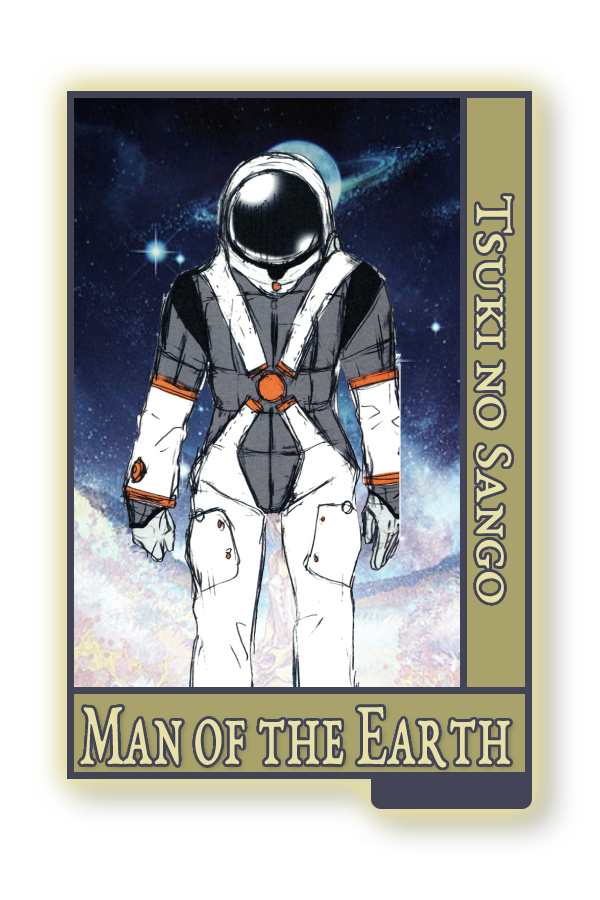
<style>
.page{position:relative;width:600px;height:900px;background:#ffffff}
.page>*{position:absolute;margin:0}
.t1{font:57.9px "EBGaramondSC08-Regular";color:#e7e1a8;scale:1.1 1}
.t2{font:95.8px "EBGaramondSC08-Regular";color:#e7e1a8;scale:0.57 1}
</style>
<div class="page">
<p class="t1" style="left:475px;top:196px;width:38px;height:407px;rotate:90deg">Tsuki no Sango</p>
<p class="t2" style="left:80px;top:707px;width:430px;height:61px">Man of the Earth</p>
</div>
